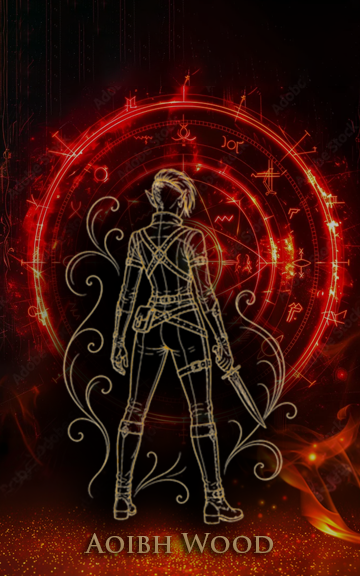
<style>
.page{position:relative;width:360px;height:576px}
.page>*{position:absolute;margin:0}
.t1{font:26px "TrajanPro3-Semibold";color:#9e7f55}
</style>
<div class="page">
<p class="t1" style="left:84px;top:533px;width:189px;height:20px">Aoibh Wood</p>
</div>
